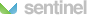
<style>
.page{position:relative;width:87px;height:15px;background:#ffffff}
.page>*{position:absolute;margin:0}
.t1{font:19px "Helvetica-Bold";letter-spacing:-0.06em;color:#c0c0c0}
</style>
<div class="page">
<p class="t1" style="left:24px;top:0px;width:63px;height:15px">sentinel</p>
</div>
